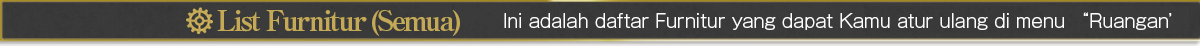
<style>
.page{position:relative;width:1200px;height:46px}
.page>*{position:absolute;margin:0}
.t1{font:28px "RyuminPro-ExBold";letter-spacing:-0.08em;color:#c4a956}
.t2{font:18px "GothicMB101Pro-Light";color:#ffffff}
</style>
<div class="page">
<p class="t1" style="left:217px;top:10px;width:243px;height:26px">List Furnitur (Semua)</p>
<p class="t2" style="left:504px;top:12px;width:668px;height:18px">Ini adalah daftar Furnitur yang dapat Kamu atur ulang di menu “Ruangan’</p>
</div>
